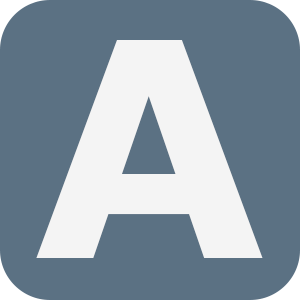
<style>
.page{position:relative;width:300px;height:300px;background:#5b7183}
.page>*{position:absolute;margin:0}
.t1{font:300px "Verdana-Bold";color:#f4f4f4}
</style>
<div class="page">
<p class="t1" style="left:36px;top:40px;width:227px;height:218px">A</p>
</div>
